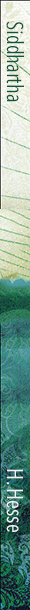
<style>
.page{position:relative;width:30px;height:610px}
.page>*{position:absolute;margin:0}
.t1{font:22.4px "AvenirNextCondensed-Regular";color:#0f553a;scale:0.94 1}
.t2{font:22.4px "AvenirNextCondensed-Regular";color:#eff3f6;scale:0.94 1}
</style>
<div class="page">
<p class="t1" style="left:6px;top:21px;width:18px;height:81px;rotate:90deg">Siddhartha</p>
<p class="t2" style="left:6px;top:469px;width:17px;height:63px;rotate:90deg">H. Hesse</p>
</div>
